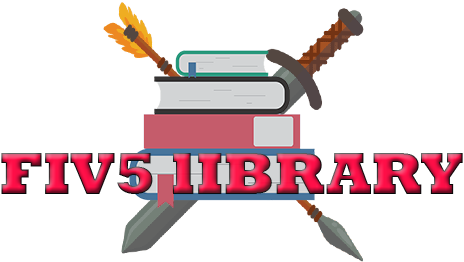
<style>
.page{position:relative;width:464px;height:262px;background:#ffffff}
.page>*{position:absolute;margin:0}
.t1{font:60px "Rockwell-ExtraBold"}
</style>
<div class="page">
<p class="t1" style="left:1px;top:153px;width:462px;height:41px">FIV5 lIBRARY</p>
</div>
